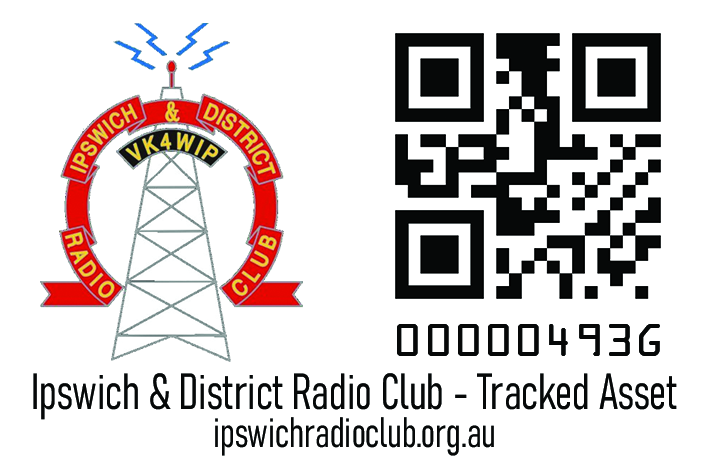
<style>
.page{position:relative;width:709px;height:472px;background:#ffffff}
.page>*{position:absolute;margin:0}
.t1{font:50px "OCRAExtended";color:#060808}
.t2{font:50px "Bahnschrift-LightCondensed";color:#060808;scale:0.87 1}
.t3{font:41.7px "Bahnschrift-LightCondensed";color:#060808;scale:0.87 1}
</style>
<div class="page">
<p class="t1" style="left:397px;top:324px;width:263px;height:32px">00000493G</p>
<p class="t2" style="left:33px;top:373px;width:644px;height:47px">Ipswich &amp; District Radio Club - Tracked Asset</p>
<p class="t3" style="left:215px;top:417px;width:279px;height:39px">ipswichradioclub.org.au</p>
</div>
